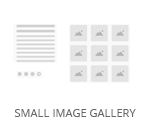
<style>
.page{position:relative;width:150px;height:130px;background:#ffffff}
.page>*{position:absolute;margin:0}
.t1{font:11px "OpenSans";color:#686868;text-transform:uppercase}
</style>
<div class="page">
<p class="t1" style="left:14px;top:109px;width:122px;height:8px">Small Image Gallery</p>
</div>
